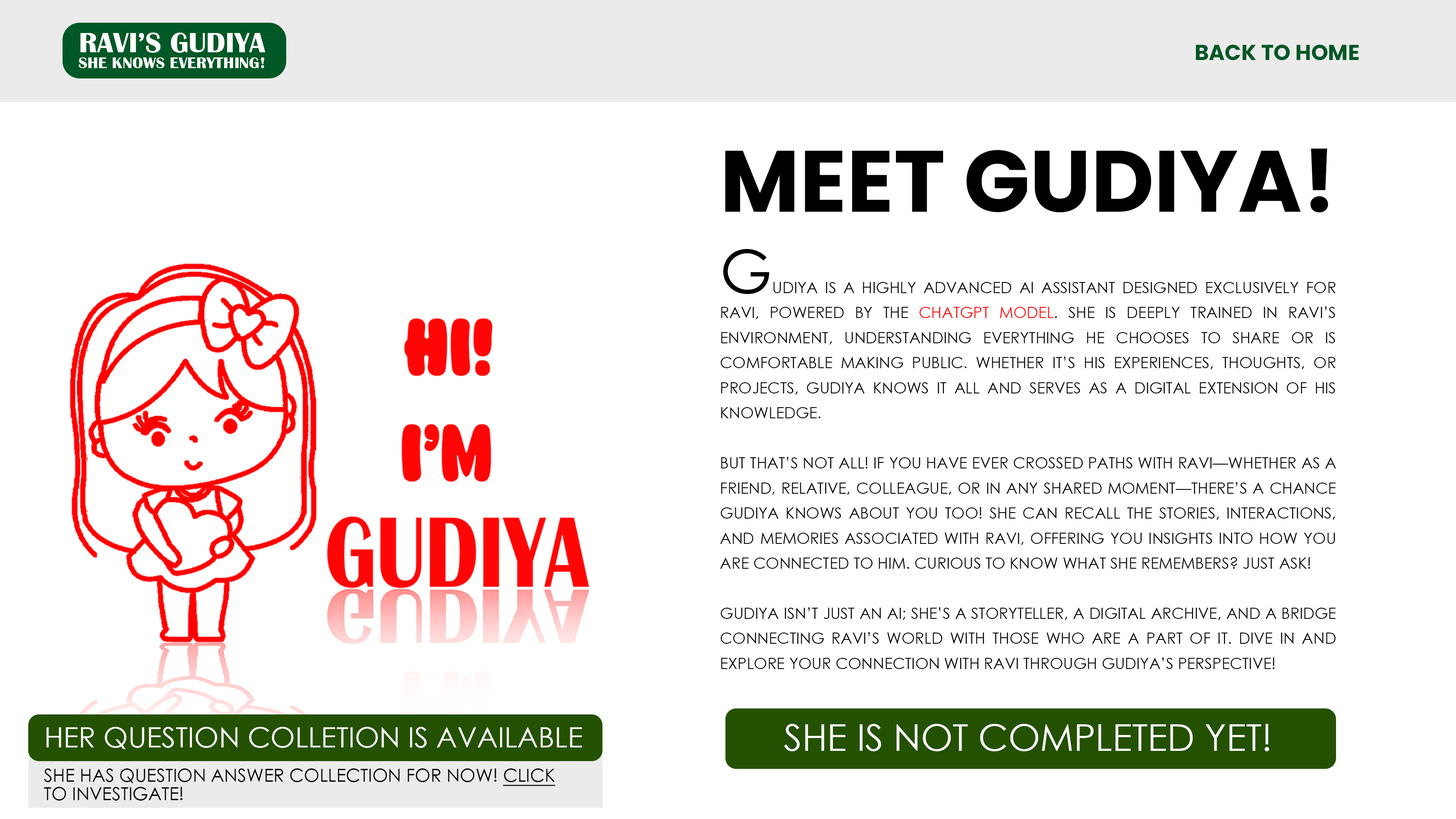
<style>
.page{position:relative;width:1456px;height:819px;background:#ffffff}
.page>*{position:absolute;margin:0}
.t1{font:29.2px "BritannicBold";color:#ffffff;text-transform:uppercase}
.t2{font:21.6px "Poppins-Bold";color:#005826;text-transform:uppercase}
.t3{font:16.5px "BritannicBold";color:#ffffff;text-transform:uppercase}
.t4{font:86.9px "Poppins-Bold";color:#000000;text-transform:uppercase}
.t5{font:15.4px/25.1px "CenturyGothic";color:#000000;text-transform:uppercase}
.t6{font:60.1px/25.1px "CenturyGothic";color:#000000;text-transform:uppercase}
.t7{font:15.4px/25.1px "CenturyGothic";color:#ff0000;text-transform:uppercase}
.t8{font:36.7px "CenturyGothic";color:#ffffff;text-transform:uppercase}
.t9{font:28.3px "CenturyGothic";color:#ffffff;text-transform:uppercase}
.t10{font:18px/18.5px "CenturyGothic";color:#000000;text-transform:uppercase}
.t11{font:18px/18.5px "CenturyGothic";color:#000000;text-transform:uppercase;text-decoration:underline}
</style>
<div class="page">
<p class="t1" style="left:80px;top:33px;width:185px;height:20px">ravi’s gudiya</p>
<p class="t2" style="left:1196px;top:45px;width:163px;height:15px">back to home</p>
<p class="t3" style="left:79px;top:57px;width:185px;height:11px">she knows everything!</p>
<p class="t4" style="left:725px;top:148px;width:603px;height:65px">Meet Gudiya!</p>
<p class="t5" style="left:720px;top:249px;width:616px;height:420px;text-align:justify"><span class="t6">G</span>udiya is a highly advanced AI assistant designed exclusively for Ravi, powered by the <span class="t7">ChatGPT model</span>. She is deeply trained in Ravi’s environment, understanding everything he chooses to share or is comfortable making public. Whether it’s his experiences, thoughts, or projects, Gudiya knows it all and serves as a digital extension of his knowledge.<br><br>But that’s not all! If you have ever crossed paths with Ravi—whether as a friend, relative, colleague, or in any shared moment—there’s a chance Gudiya knows about you too! She can recall the stories, interactions, and memories associated with Ravi, offering you insights into how you are connected to him. Curious to know what she remembers? Just ask!<br><br>Gudiya isn’t just an AI; she’s a storyteller, a digital archive, and a bridge connecting Ravi’s world with those who are a part of it. Dive in and explore your connection with Ravi through Gudiya’s perspective!</p>
<p class="t8" style="left:784px;top:724px;width:485px;height:27px">she is not completed yet!</p>
<p class="t9" style="left:46px;top:727px;width:536px;height:22px">her question colletion is available</p>
<p class="t10" style="left:44px;top:768px;width:511px;height:32px">she has question answer collection for now! <span class="t11">click<br></span>to investigate!</p>
</div>
